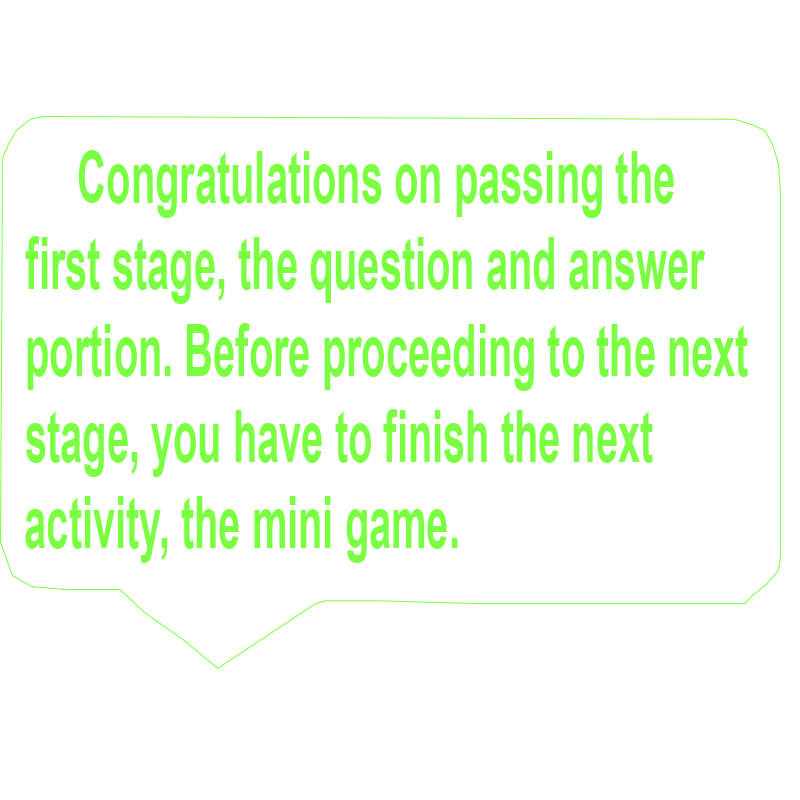
<style>
.page{position:relative;width:800px;height:800px;background:#ffffff}
.page>*{position:absolute;margin:0}
.t1{font:72px "Arial-BoldMT";color:#7bff41;scale:0.55 1}
.t2{font:59.2px "MicrosoftYaHei-Bold";color:#7bff41;scale:0.55 1}
</style>
<div class="page">
<p class="t1" style="left:25px;top:150px;width:723px;height:413px"><span class="t2"><br>       </span>Congratulations on passing the first stage, the question and answer portion. Before proceeding to the next stage, you have to finish the next <br>activity, the mini game.</p>
</div>
